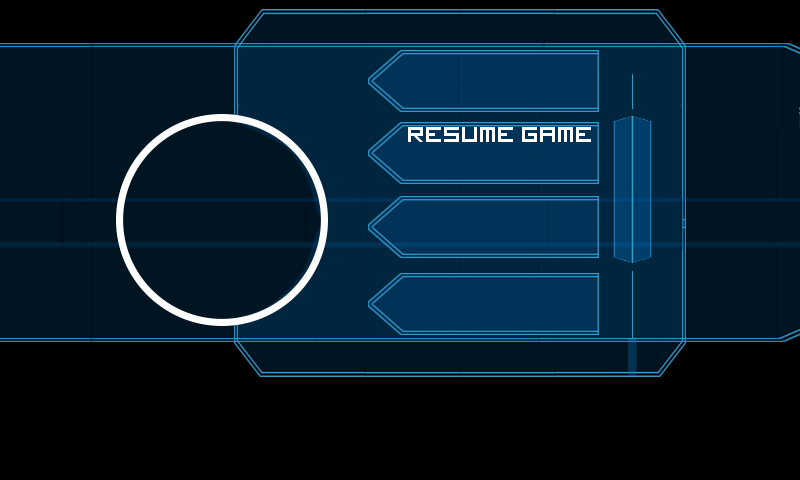
<style>
.page{position:relative;width:800px;height:480px;background:#001422}
.page>*{position:absolute;margin:0}
.t1{font:24px "imagine-font";color:#ffffff}
</style>
<div class="page">
<p class="t1" style="left:408px;top:127px;width:183px;height:15px">RESUME GAME</p>
</div>
